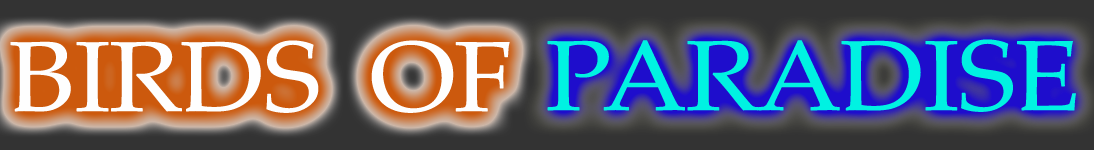
<style>
.page{position:relative;width:1094px;height:150px;background:#333333}
.page>*{position:absolute;margin:0}
.t1{font:100px "PalatinoLinotype-Roman";letter-spacing:-0.02em;color:#fefefe;scale:1.1 1}
.t2{font:100px "PalatinoLinotype-Roman";letter-spacing:-0.02em;color:#00f2e2;scale:1.1 1}
</style>
<div class="page">
<p class="t1" style="left:10px;top:40px;width:500px;height:73px">BIRDS  OF</p>
<p class="t2" style="left:547px;top:39px;width:529px;height:73px">PARADISE</p>
</div>
